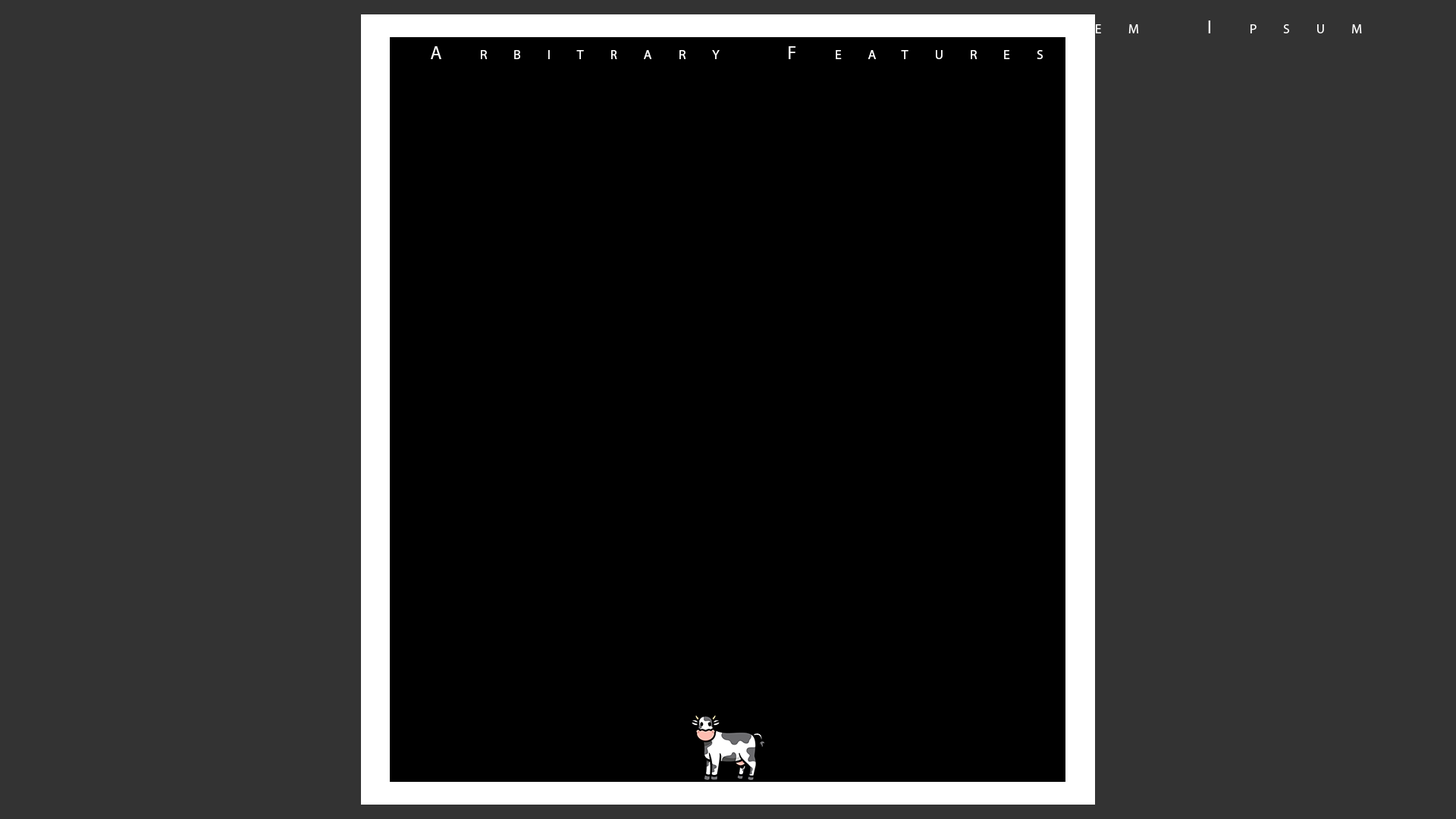
<style>
.page{position:relative;width:1456px;height:819px;background:#333333}
.page>*{position:absolute;margin:0}
.t1{font:19px "MyriadPro-Regular";letter-spacing:2em;color:#ffffff;font-variant:small-caps}
</style>
<div class="page">
<p class="t1" style="left:431px;top:46px;width:612px;height:13px">Arbitrary Features</p>
</div>
